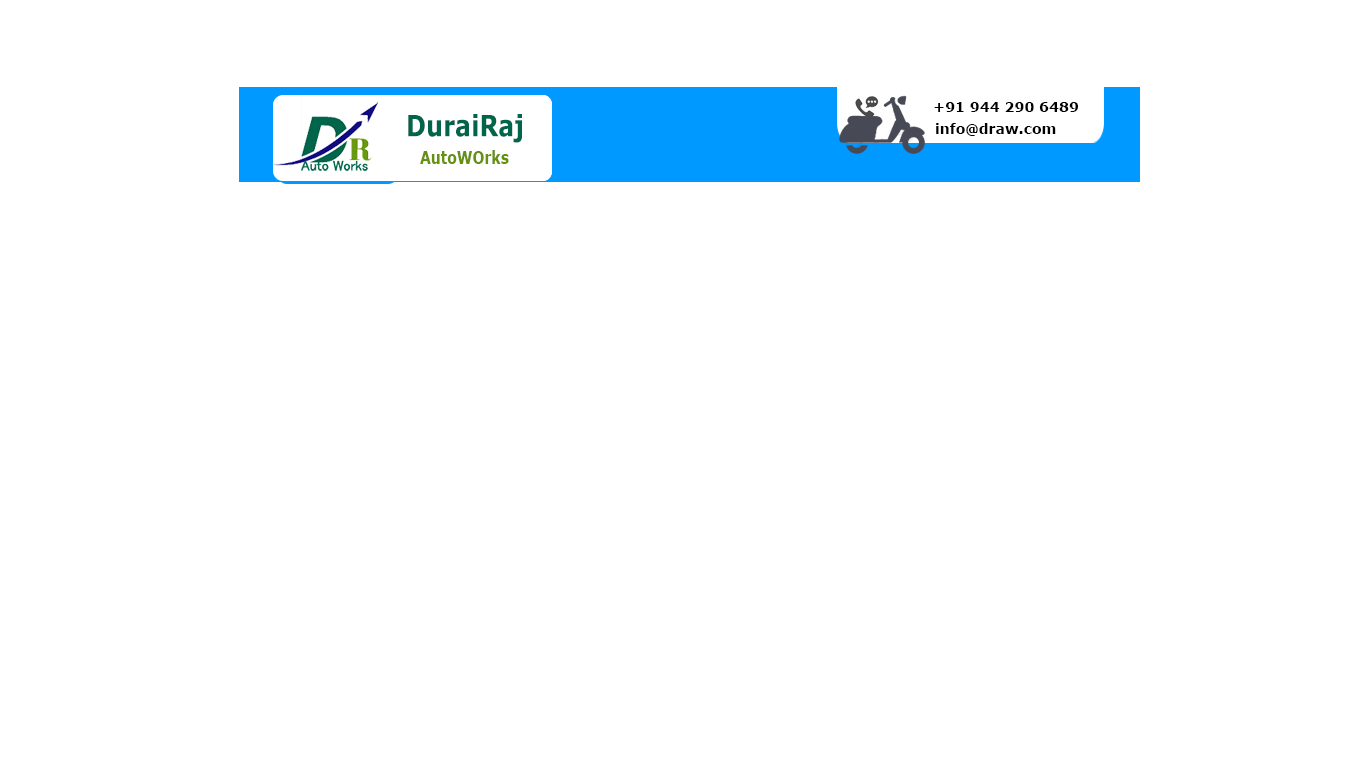
<style>
.page{position:relative;width:1366px;height:768px;background:#ffffff}
.page>*{position:absolute;margin:0}
.t1{font:14px "Verdana-Bold";color:#000000}
.t2{font:29.1px "Verdana-Bold";color:#00654a;scale:0.83 1}
.t3{font:18px "Verdana-Bold";color:#659111;scale:0.78 1}
</style>
<div class="page">
<p class="t1" style="left:934px;top:102px;width:144px;height:10px">+91 944 290 6489</p>
<p class="t2" style="left:408px;top:114px;width:114px;height:29px">DuraiRaj</p>
<p class="t1" style="left:936px;top:123px;width:120px;height:13px">info@draw.com</p>
<p class="t3" style="left:420px;top:150px;width:89px;height:14px">AutoWOrks</p>
</div>
